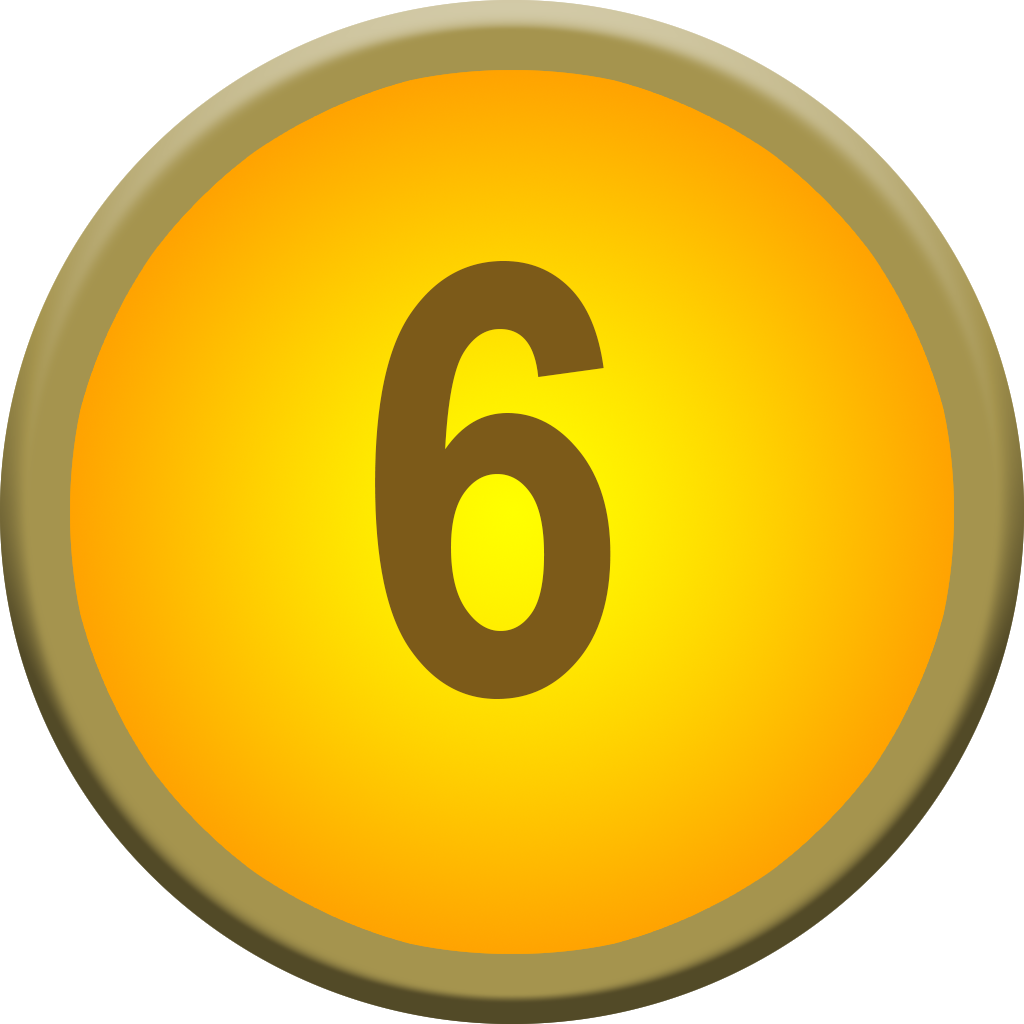
<style>
.page{position:relative;width:1024px;height:1024px;background:#ffffff}
.page>*{position:absolute;margin:0}
.t1{font:600px "ArialNarrow-Bold";color:#7c5a19}
</style>
<div class="page">
<p class="t1" style="left:375px;top:261px;width:236px;height:438px">6</p>
</div>
